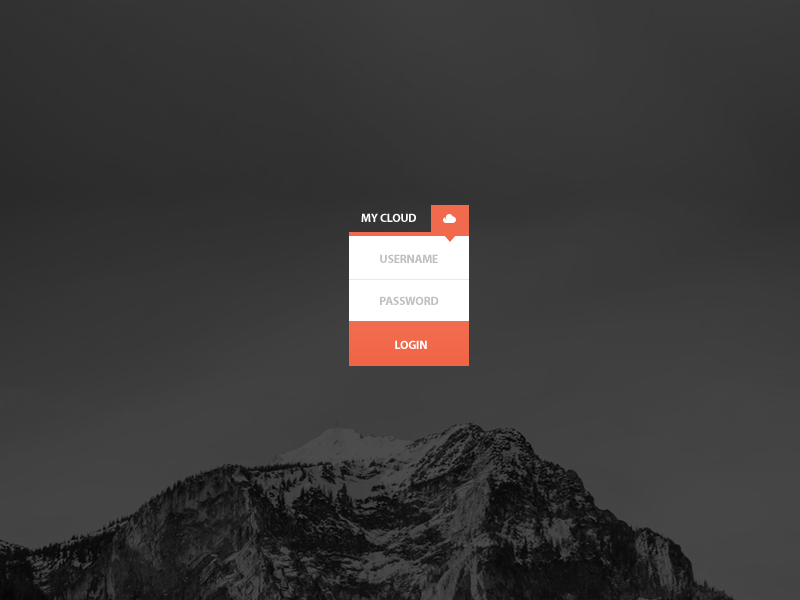
<style>
.page{position:relative;width:800px;height:600px}
.page>*{position:absolute;margin:0}
.t1{font:12px "MyriadPro-Bold";letter-spacing:-0.025em;color:#ffffff;text-transform:uppercase}
.t2{font:12px/42px "MyriadPro-Bold";letter-spacing:-0.025em;color:#c0bfc0;text-transform:uppercase}
</style>
<div class="page">
<p class="t1" style="left:361px;top:213px;width:55px;height:9px">my cloud</p>
<p class="t2" style="left:380px;top:254px;width:59px;height:51px;text-align:center">username<br>password</p>
<p class="t1" style="left:395px;top:340px;width:32px;height:9px">login</p>
</div>
